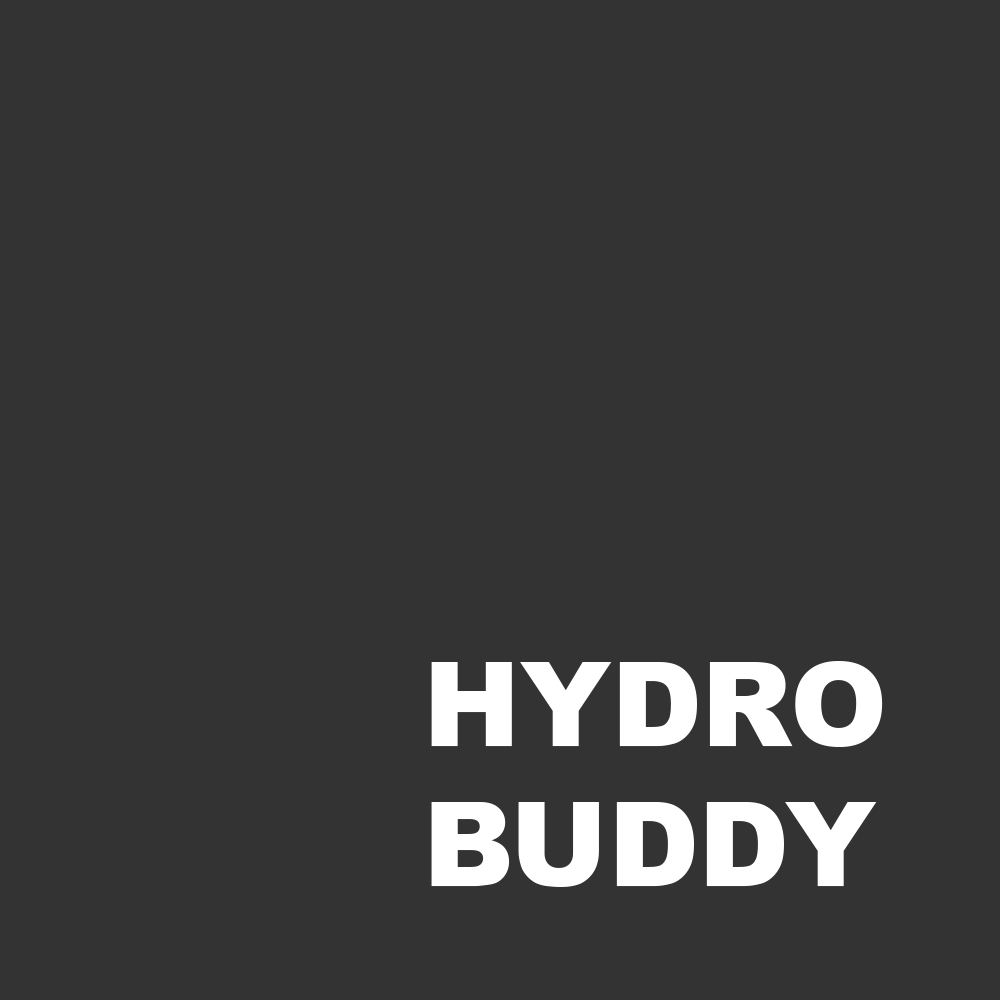
<style>
.page{position:relative;width:1000px;height:1000px;background:#333333}
.page>*{position:absolute;margin:0}
.t1{font:116.7px "Arial-Black";color:#ffffff}
</style>
<div class="page">
<p class="t1" style="left:431px;top:661px;width:452px;height:226px">HYDRO<br>BUDDY</p>
</div>
